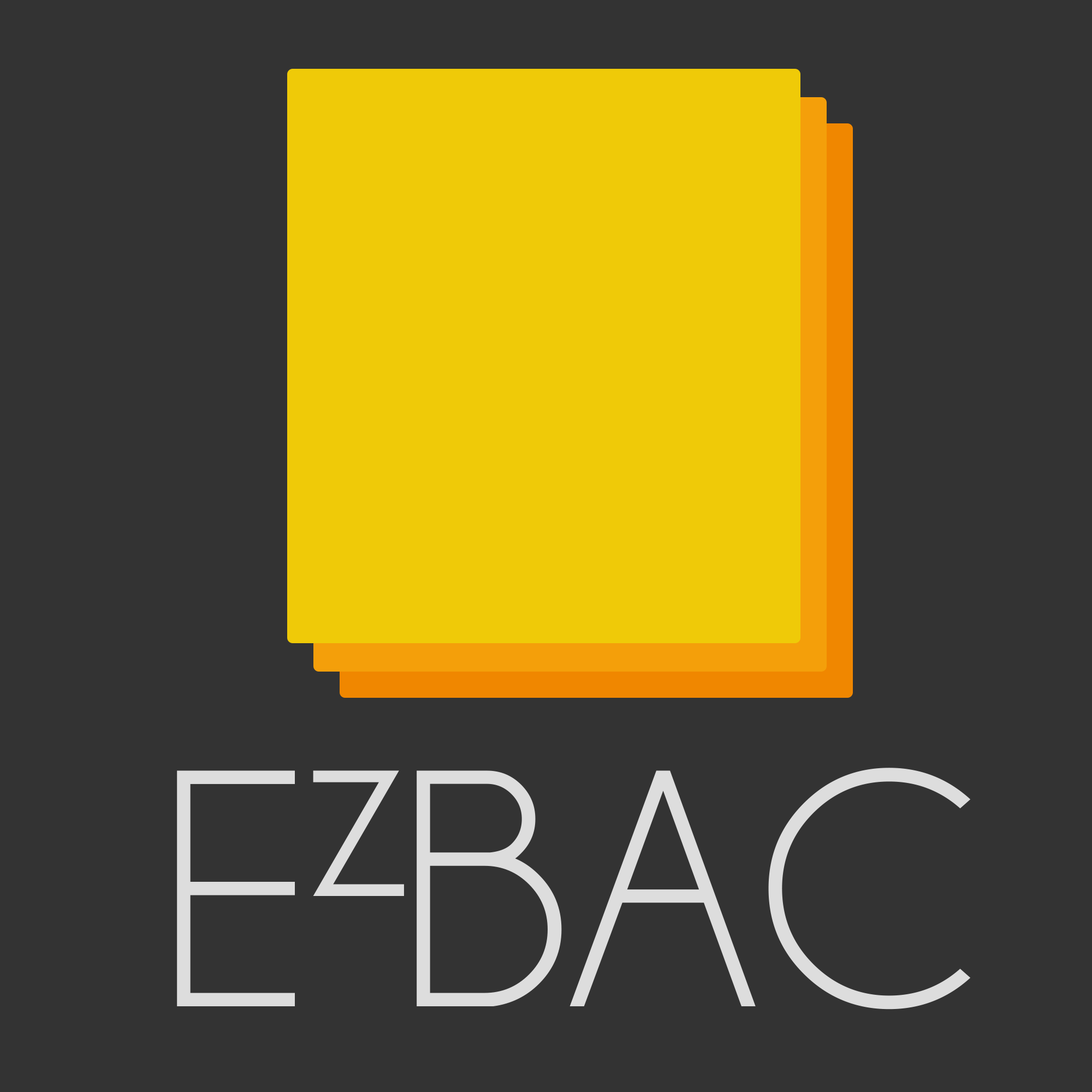
<style>
.page{position:relative;width:1092px;height:1092px;background:#333333}
.page>*{position:absolute;margin:0}
.t1{font:341.2px "Champagne&Limousines";color:#dddddd}
.t2{font:300.3px "Champagne&Limousines";color:#dddddd}
</style>
<div class="page">
<p class="t1" style="left:177px;top:768px;width:794px;height:242px">E BAC</p>
<p class="t2" style="left:313px;top:770px;width:91px;height:126px">z</p>
</div>
